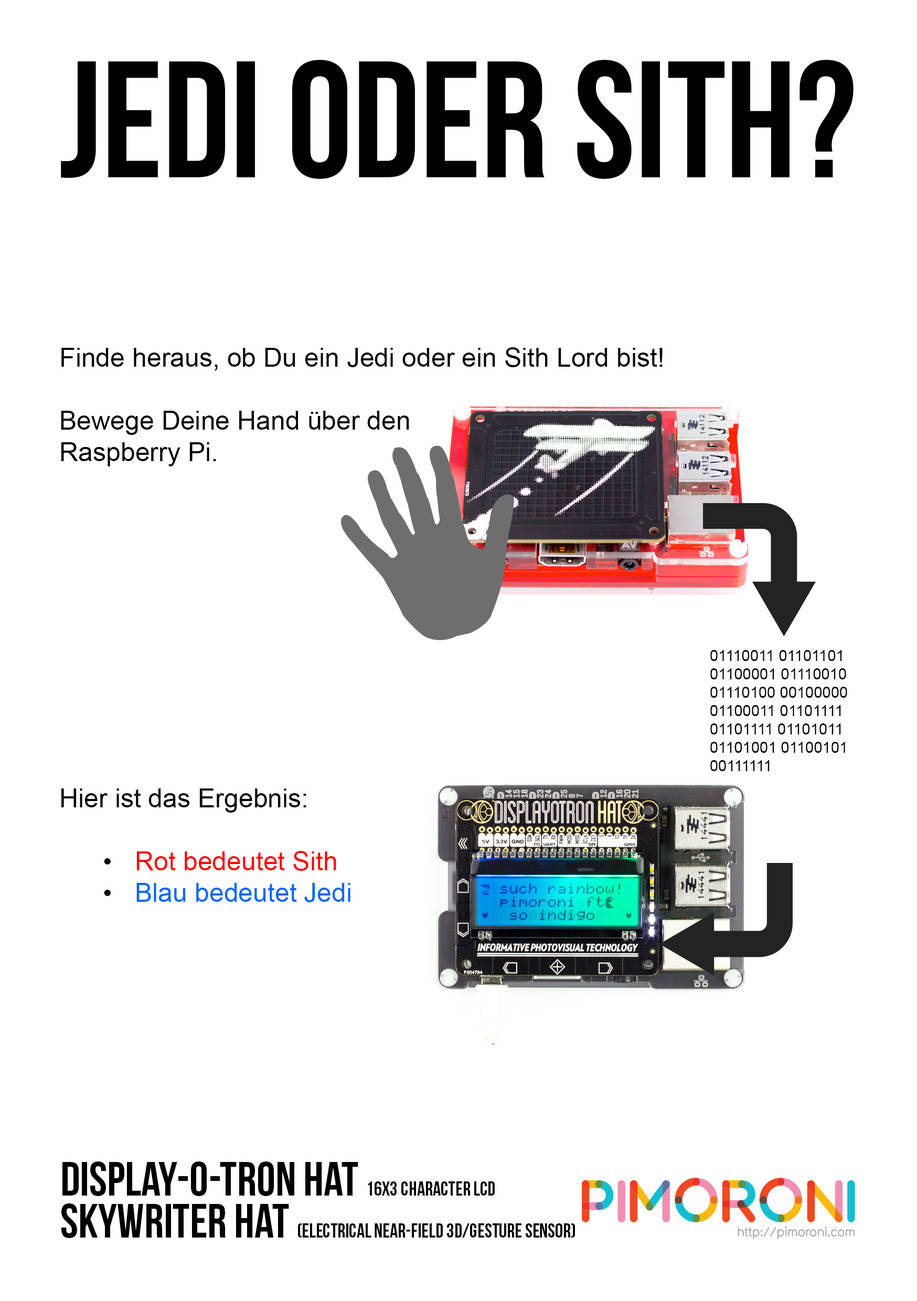
<style>
.page{position:relative;width:917px;height:1301px;background:#ffffff}
.page>*{position:absolute;margin:0}
.t1{font:165.8px "BebasNeue";color:#000000}
.t2{font:26.2px "ArialMT";color:#000000}
.t3{font:26.2px "ArialMT";color:#ff0000}
.t4{font:26.2px "ArialMT";color:#0066ff}
.t5{font:15.3px "ArialMT";color:#000000}
.t6{font:48.1px "BebasNeue";color:#000000}
.t7{font:19.7px "BebasNeue";color:#000000}
</style>
<div class="page">
<p class="t1" style="left:61px;top:60px;width:792px;height:119px">Jedi oder Sith?</p>
<p class="t2" style="left:61px;top:347px;width:601px;height:555px">Finde heraus, ob Du ein Jedi oder ein Sith Lord bist!<br><br>Bewege Deine Hand über den<br>Raspberry Pi.<br><br><br><br><br><br><br><br><br><br><br>Hier ist das Ergebnis:<br><br>•  <span class="t3">Rot bedeutet Sith<br></span>•  <span class="t4">Blau bedeutet Jedi</span></p>
<p class="t5" style="left:710px;top:650px;width:137px;height:121px">01110011 01101101<br>01100001 01110010<br>01110100 00100000<br>01100011 01101111<br>01101111 01101011<br>01101001 01100101<br>00111111</p>
<p class="t6" style="left:62px;top:1161px;width:433px;height:35px">Display-O-Tron HAT <span class="t7">16x3 character LCD</span></p>
<p class="t7" style="left:61px;top:1203px;width:514px;height:35px"><span class="t6">Skywriter Hat </span>(Electrical near-field 3D/gesture sensor)</p>
</div>
